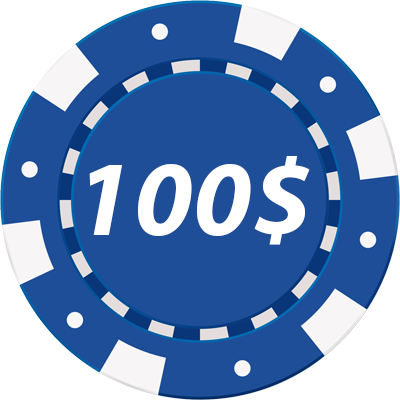
<style>
.page{position:relative;width:400px;height:400px;background:#1e4e98}
.page>*{position:absolute;margin:0}
.t1{font:108.3px "MyriadPro-BoldIt";letter-spacing:0.01em;color:#ffffff}
</style>
<div class="page">
<p class="t1" style="left:89px;top:156px;width:221px;height:89px">100$</p>
</div>
